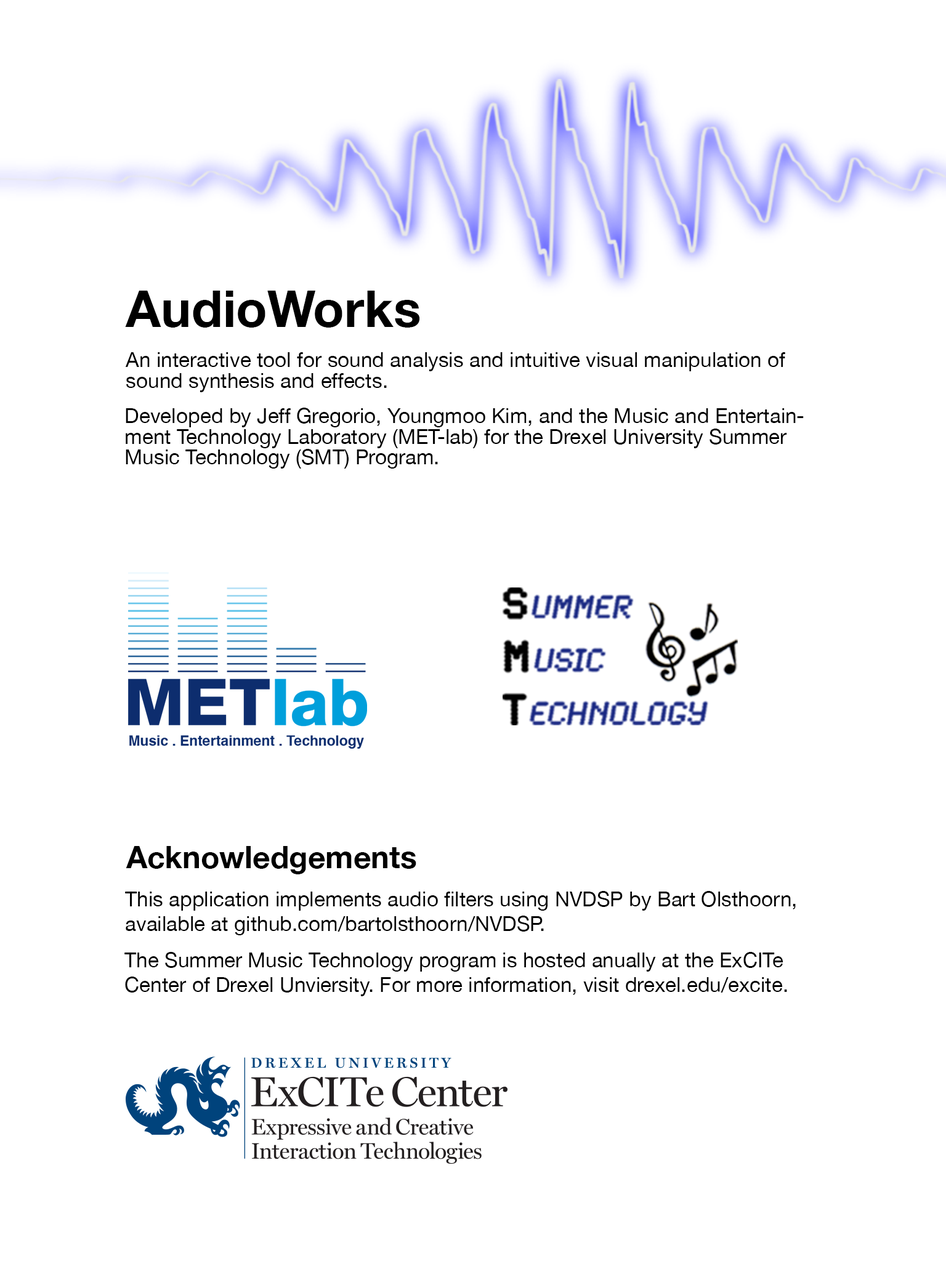
<style>
.page{position:relative;width:946px;height:1261px;background:#ffffff}
.page>*{position:absolute;margin:0}
.t1{font:51.3px "HelveticaNeue-Bold";color:#000000}
.t2{font:20.5px "HelveticaNeue";color:#000000}
.t3{font:30.8px "HelveticaNeue-Bold";color:#000000}
</style>
<div class="page">
<p class="t1" style="left:125px;top:291px;width:295px;height:37px">AudioWorks</p>
<p class="t2" style="left:125px;top:352px;width:660px;height:40px;text-align:justify">An interactive tool for sound analysis and intuitive visual manipulation of <br>sound synthesis and effects.</p>
<p class="t2" style="left:126px;top:408px;width:677px;height:61px;text-align:justify">Developed by Jeff Gregorio, Youngmoo Kim, and the Music and Entertain-<br>ment Technology Laboratory (MET-lab) for the Drexel University Summer <br>Music Technology (SMT) Program.</p>
<p class="t3" style="left:126px;top:846px;width:290px;height:28px">Acknowledgements</p>
<p class="t2" style="left:125px;top:891px;width:670px;height:44px;text-align:justify">This application implements audio filters using NVDSP by Bart Olsthoorn, <br>available at github.com/bartolsthoorn/NVDSP.</p>
<p class="t2" style="left:124px;top:952px;width:663px;height:44px;text-align:justify">The Summer Music Technology program is hosted anually at the ExCITe <br>Center of Drexel Unviersity. For more information, visit drexel.edu/excite.</p>
</div>
